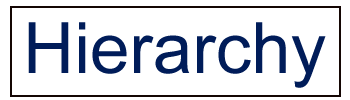
<style>
.page{position:relative;width:350px;height:100px;background:#ffffff}
.page>*{position:absolute;margin:0}
.t1{font:70.8px "ArialMT";color:#001c59}
</style>
<div class="page">
<p class="t1" style="left:28px;top:22px;width:298px;height:66px">Hierarchy</p>
</div>
